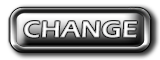
<style>
.page{position:relative;width:160px;height:60px}
.page>*{position:absolute;margin:0}
.t1{font:24.1px "ErasITC-Demi";scale:1.09 1}
</style>
<div class="page">
<p class="t1" style="left:24px;top:21px;width:113px;height:17px">CHANGE</p>
</div>
